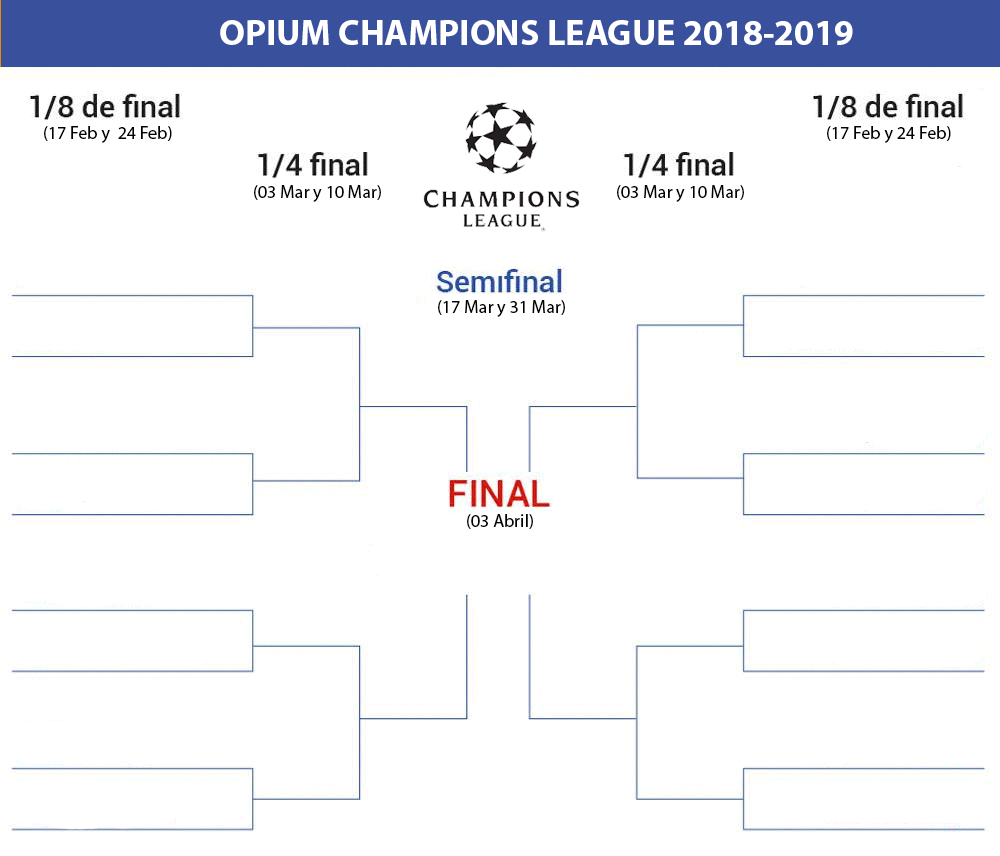
<style>
.page{position:relative;width:1000px;height:856px;background:#ffffff}
.page>*{position:absolute;margin:0}
.t1{font:36px "MyriadPro-Bold";color:#ffffff}
.t2{font:18px "MyriadPro-Regular";color:#000000}
</style>
<div class="page">
<p class="t1" style="left:220px;top:20px;width:633px;height:25px">OPIUM CHAMPIONS LEAGUE 2018-2019</p>
<p class="t2" style="left:44px;top:126px;width:128px;height:17px">(17 Feb y  24 Feb)</p>
<p class="t2" style="left:827px;top:126px;width:124px;height:17px">(17 Feb y 24 Feb)</p>
<p class="t2" style="left:254px;top:185px;width:127px;height:17px">(03 Mar y 10 Mar)</p>
<p class="t2" style="left:617px;top:185px;width:127px;height:17px">(03 Mar y 10 Mar)</p>
<p class="t2" style="left:438px;top:300px;width:127px;height:17px">(17 Mar y 31 Mar)</p>
<p class="t2" style="left:467px;top:514px;width:66px;height:15px">(03 Abril)</p>
</div>
